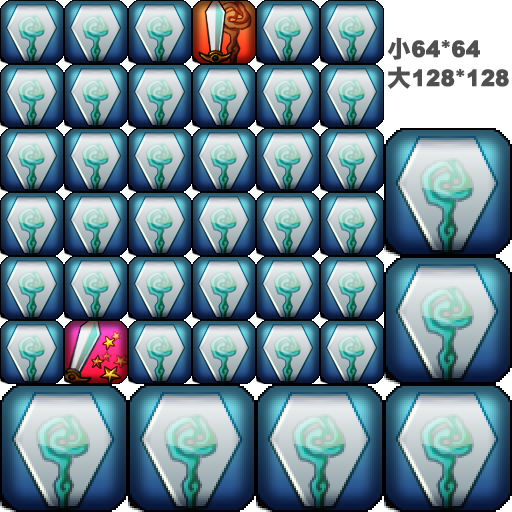
<style>
.page{position:relative;width:512px;height:512px}
.page>*{position:absolute;margin:0}
.t1{font:24px/28.8px "DHPGothic-EB-WIN-RKSJ-H";color:#505050}
</style>
<div class="page">
<p class="t1" style="left:387px;top:37px;width:122px;height:52px">小64*64<br>大128*128</p>
</div>
